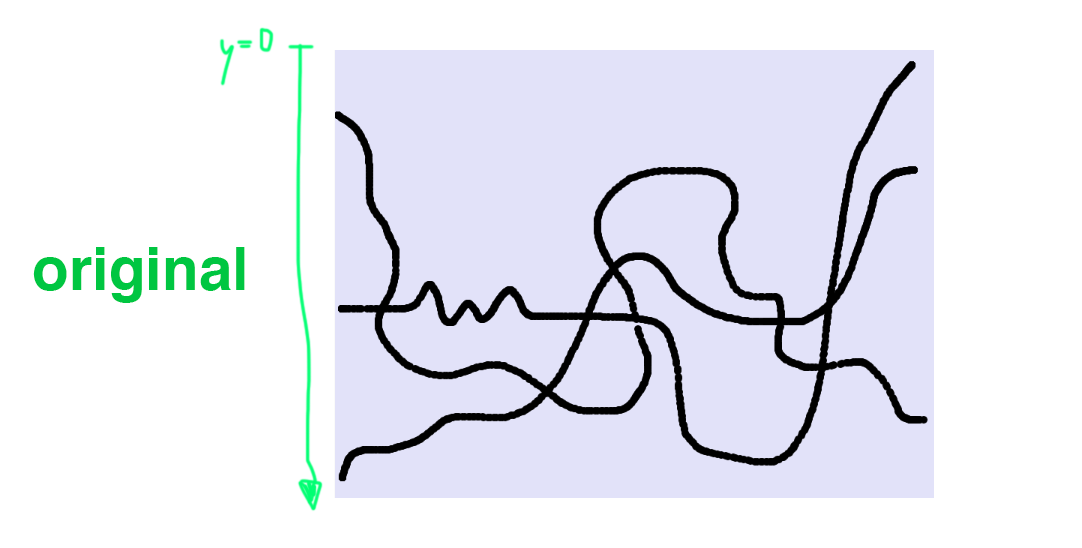
<style>
.page{position:relative;width:1082px;height:548px;background:#ffffff}
.page>*{position:absolute;margin:0}
.t1{font:60px "Helvetica-Bold";color:#00c641}
</style>
<div class="page">
<p class="t1" style="left:33px;top:247px;width:212px;height:56px">original</p>
</div>
